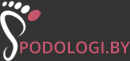
<style>
.page{position:relative;width:130px;height:61px;background:#333333}
.page>*{position:absolute;margin:0}
.t1{font:16.2px "OpenSans-SemiBold";color:#c7556c}
</style>
<div class="page">
<p class="t1" style="left:20px;top:41px;width:110px;height:13px">PODOLOGI.BY</p>
</div>
